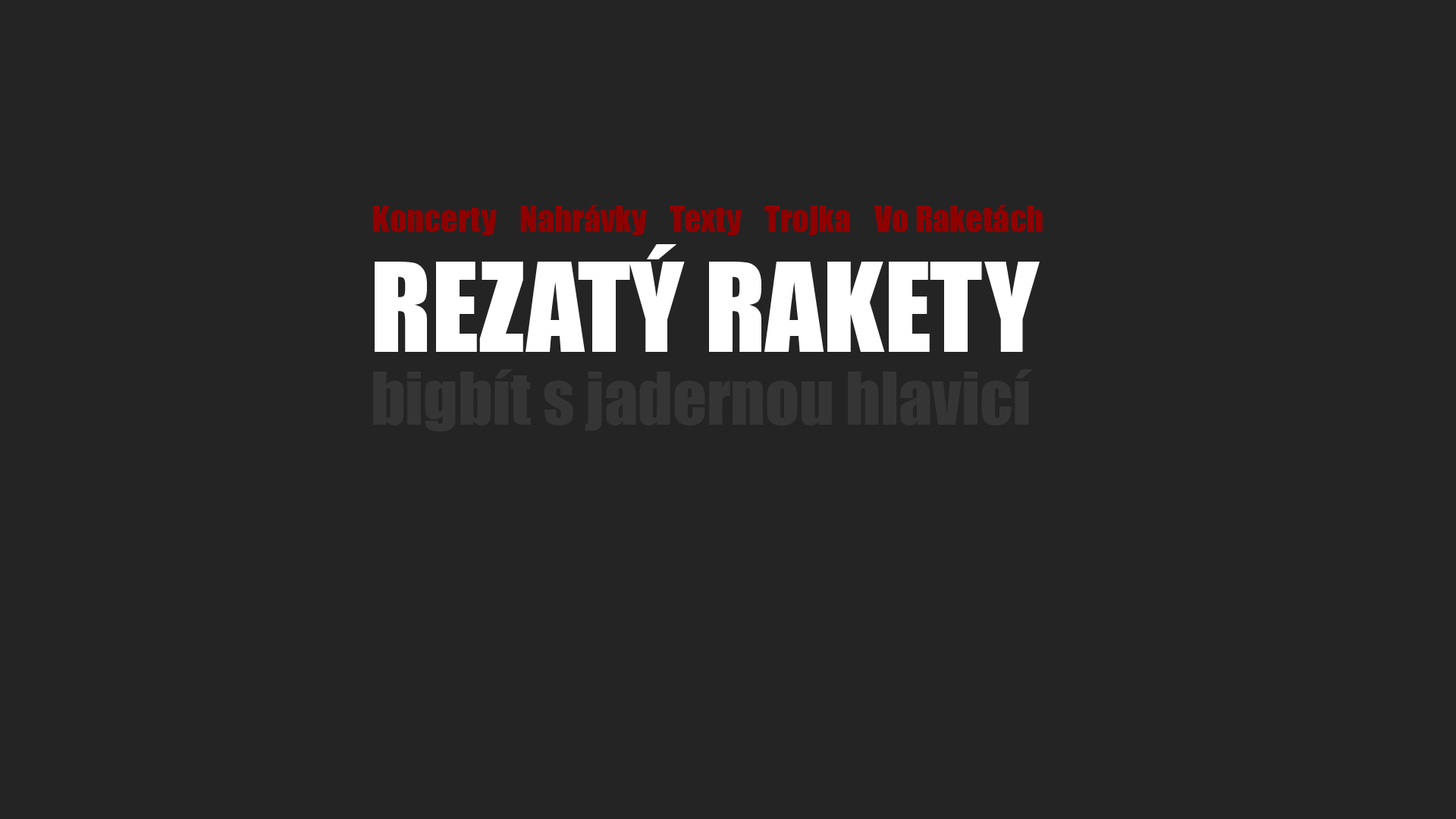
<style>
.page{position:relative;width:1456px;height:819px;background:#242424}
.page>*{position:absolute;margin:0}
.t1{font:33.4px "Impact";color:#8f0101}
.t2{font:113.7px "Impact";color:#ffffff}
.t3{font:66.5px "Impact";color:#353535}
</style>
<div class="page">
<p class="t1" style="left:372px;top:205px;width:671px;height:30px">Koncerty    Nahrávky    Texty    Trojka    Vo Raketách</p>
<p class="t2" style="left:375px;top:244px;width:665px;height:108px">REZATÝ RAKETY</p>
<p class="t3" style="left:373px;top:369px;width:660px;height:62px">bigbít s jadernou hlavicí</p>
</div>
